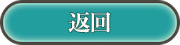
<style>
.page{position:relative;width:180px;height:45px;background:#239e9f}
.page>*{position:absolute;margin:0}
.t1{font:23px "RyuminPr6N-ExBold";color:#ffffff}
</style>
<div class="page">
<p class="t1" style="left:68px;top:12px;width:42px;height:21px">返回</p>
</div>
